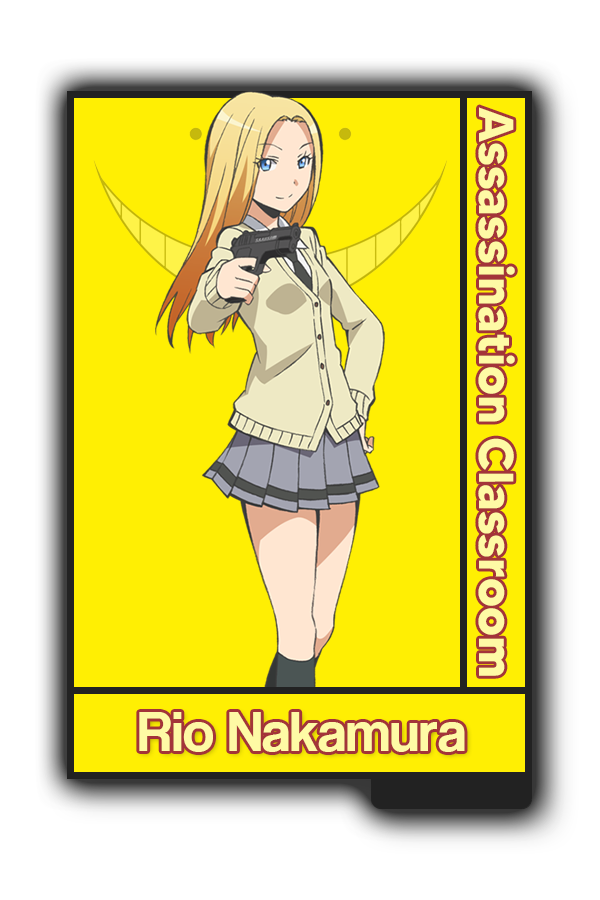
<style>
.page{position:relative;width:600px;height:900px;background:#ffef03}
.page>*{position:absolute;margin:0}
.t1{font:48.8px "MADETOMMY-Bold";color:#fefaa5}
.t2{font:57.8px "CoolveticaRg-Regular";color:#fefaa5}
</style>
<div class="page">
<p class="t1" style="left:478px;top:107px;width:37px;height:569px;rotate:90deg">Assassination Classroom</p>
<p class="t2" style="left:139px;top:712px;width:326px;height:40px">Rio Nakamura</p>
</div>
